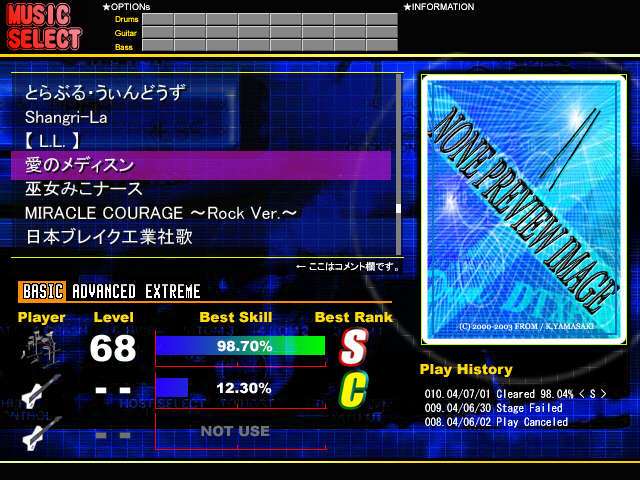
<style>
.page{position:relative;width:640px;height:480px}
.page>*{position:absolute;margin:0}
.t1{font:24px/12px "DFMaruGothic-SU-WIN-RKSJ-H"}
.t2{font:9px "ArialMT";color:#fdf8f8}
.t3{font:9px "MS-Gothic";color:#fdf8f8}
.t4{font:8px/14px "ArialMT";color:#fbd60a}
.t5{font:18px/24px "MS-PGothic";color:#f7f9f7}
.t6{font:10px "MS-PGothic";color:#fdf8f8}
.t7{font:14px "Arial-Black";color:#ffda0f}
.t8{font:36px "Arial-Black";color:#fdfffd}
.t9{font:14px "Arial-Black";color:#fefcfc}
.t10{font:11px/14px "MS-Gothic";color:#f6f6f6}
.t11{font:14px/24px "Arial-Black";color:#ffda0f}
.t12{font:11px/24px "MS-Gothic";color:#f6f6f6}
.t13{font:14px "Arial-Black";color:#727171}
.t14{font:36px "Arial-Black";color:#707170}
</style>
<div class="page">
<p class="t1" style="left:8px;top:5px;width:73px;height:44px">MUSIC<br><br>SELECT</p>
<p class="t2" style="left:102px;top:3px;width:48px;height:8px"><span class="t3">★</span>OPTIONs</p>
<p class="t2" style="left:403px;top:3px;width:71px;height:8px"><span class="t3">★</span>INFORMATION</p>
<p class="t4" style="left:115px;top:16px;width:24px;height:34px">Drums<br>Guitar<br>Bass</p>
<p class="t5" style="left:25px;top:84px;width:272px;height:161px">とらぶる・うぃんどうず<br>Shangri-La<br>【 L.L. 】<br>愛のメディスン<br>巫女みこナース<br>MIRACLE COURAGE ～Rock Ver.～<br>日本ブレイク工業社歌</p>
<p class="t6" style="left:296px;top:262px;width:102px;height:9px">← ここはコメント欄です。</p>
<p class="t7" style="left:18px;top:311px;width:375px;height:14px">Player      Level              Best Skill         Best Rank</p>
<p class="t8" style="left:90px;top:334px;width:46px;height:28px">68</p>
<p class="t9" style="left:217px;top:340px;width:56px;height:12px">98.70%</p>
<p class="t10" style="left:420px;top:364px;width:186px;height:64px"><span class="t11">Play History<br>  </span><span class="t12">010.</span>04/07/01 Cleared 98.04% &lt; S &gt;<br> 009.04/06/30 Stage Failed<br> 008.04/06/02 Play Canceled</p>
<p class="t8" style="left:95px;top:387px;width:36px;height:7px">- -</p>
<p class="t9" style="left:217px;top:382px;width:55px;height:12px">12.30%</p>
<p class="t13" style="left:201px;top:425px;width:69px;height:12px">NOT USE</p>
<p class="t14" style="left:95px;top:432px;width:36px;height:7px">- -</p>
</div>
